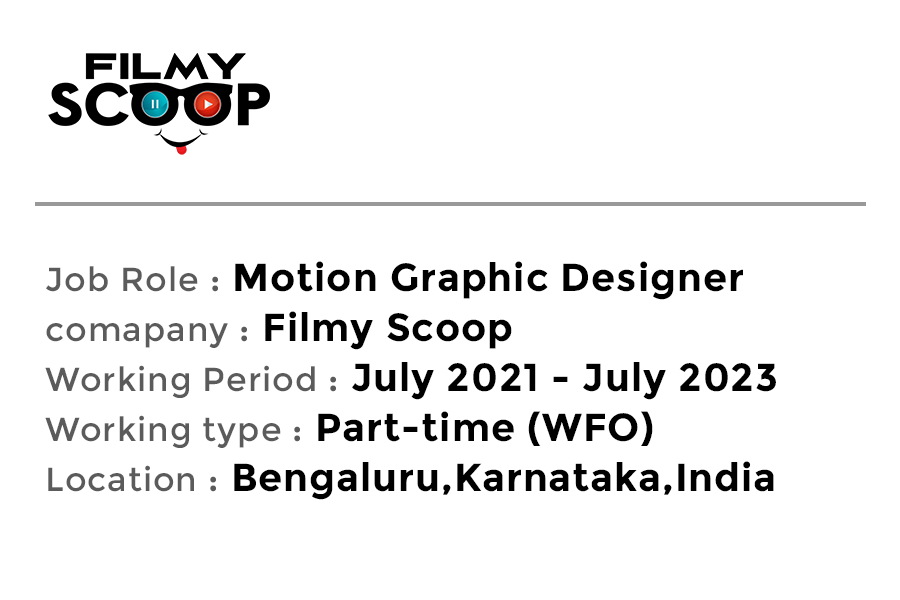
<style>
.page{position:relative;width:900px;height:600px;background:#ffffff}
.page>*{position:absolute;margin:0}
.t1{font:38.9px/50px "Montserrat-Bold";letter-spacing:0.025em;color:#000000}
.t2{font:33.3px/50px "Montserrat-Regular";letter-spacing:0.025em;color:#5c5b5b}
.t3{font:33.3px/50px "Montserrat-Bold";letter-spacing:0.025em;color:#5c5b5b}
</style>
<div class="page">
<p class="t1" style="left:45px;top:261px;width:731px;height:239px"><span class="t2">Job Role </span><span class="t3">:</span> Motion Graphic Designer<br><span class="t2">comapany </span><span class="t3">:</span> Filmy Scoop<br><span class="t2">Working Period </span><span class="t3">:</span> July 2021 - July 2023<br><span class="t2">Working type </span><span class="t3">:</span> Part-time (WFO)<br><span class="t2">Location </span><span class="t3">:</span> Bengaluru,Karnataka,India</p>
</div>
